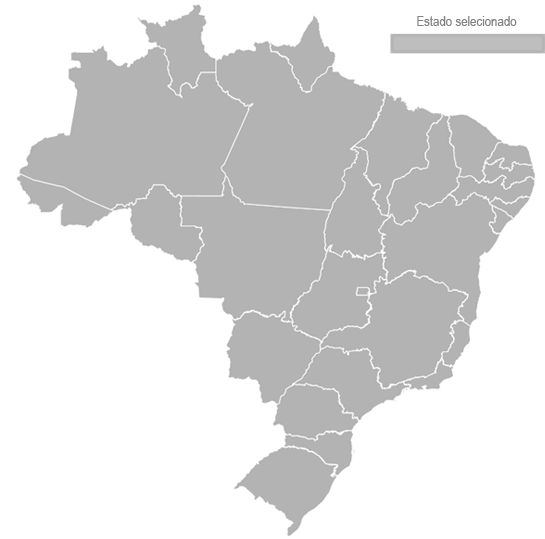
<style>
.page{position:relative;width:545px;height:539px;background:#ffffff}
.page>*{position:absolute;margin:0}
.t1{font:14px "ArialNarrow";color:#828282}
</style>
<div class="page">
<p class="t1" style="left:417px;top:16px;width:100px;height:10px">Estado selecionado</p>
</div>
